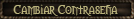
<style>
.page{position:relative;width:134px;height:19px}
.page>*{position:absolute;margin:0}
.t1{font:12px "Morpheus";color:#b9b27c}
</style>
<div class="page">
<p class="t1" style="left:13px;top:4px;width:105px;height:12px">Cambiar Contraseña</p>
</div>
